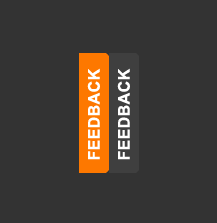
<style>
.page{position:relative;width:217px;height:223px;background:#333333}
.page>*{position:absolute;margin:0}
.t1{font:16px "Arial-BoldMT";color:#ffffff}
</style>
<div class="page">
<p class="t1" style="left:87px;top:68px;width:13px;height:92px;rotate:-90deg">FEEDBACK</p>
<p class="t1" style="left:117px;top:68px;width:13px;height:92px;rotate:-90deg">FEEDBACK</p>
</div>
